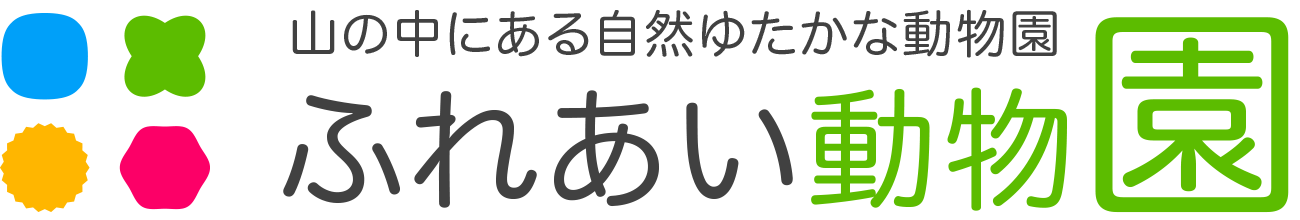
<style>
.page{position:relative;width:1300px;height:220px;background:#ffffff}
.page>*{position:absolute;margin:0}
.t1{font:130.9px "HiraMaruProN-W4";letter-spacing:0.05em;color:#414141}
.t2{font:130.9px "HiraMaruProN-W4";letter-spacing:0.05em;color:#5cbc00}
.t3{font:222px "HiraMaruProN-W4";letter-spacing:0.05em;color:#5cbc00}
.t4{font:50.9px "HiraMaruProN-W4";letter-spacing:0.05em;color:#414141}
</style>
<div class="page">
<p class="t1" style="left:283px;top:17px;width:1006px;height:196px">ふれあい<span class="t2">動物</span><span class="t3">園</span></p>
<p class="t4" style="left:292px;top:9px;width:765px;height:49px">山の中にある自然ゆたかな動物園</p>
</div>
